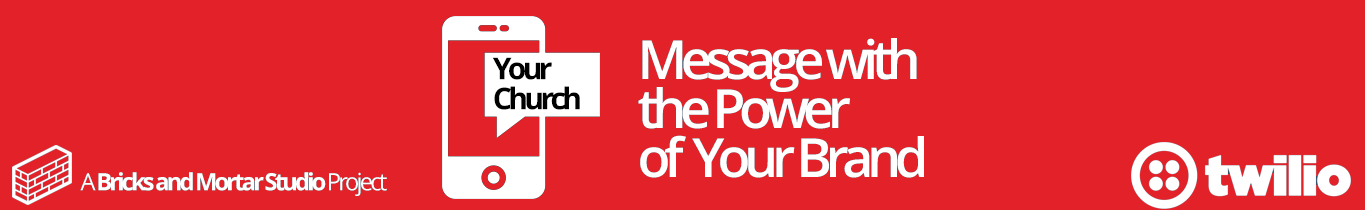
<style>
.page{position:relative;width:1365px;height:210px;background:#e22228}
.page>*{position:absolute;margin:0}
.t1{font:54px/48.9px "OpenSans-Semibold";letter-spacing:-0.12em;color:#ffffff}
.t2{font:30px/30px "OpenSans-Bold";letter-spacing:-0.12em;color:#000000}
.t3{font:23.8px "OpenSans-Bold";letter-spacing:-0.12em;color:#ffffff}
.t4{font:23.8px "OpenSans";letter-spacing:-0.12em;color:#ffffff}
</style>
<div class="page">
<p class="t1" style="left:638px;top:38px;width:286px;height:140px">Message with <br>the Power <br>of  Your Brand</p>
<p class="t2" style="left:492px;top:57px;width:88px;height:53px">Your <br>Church</p>
<p class="t3" style="left:80px;top:172px;width:307px;height:24px"><span class="t4">A </span>Bricks and Mortar Studio <span class="t4">Project</span></p>
</div>
